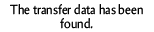
<style>
.page{position:relative;width:154px;height:32px;background:#ffffff}
.page>*{position:absolute;margin:0}
.t1{font:13.2px "Amira-Roman";color:#000000;scale:0.91 1}
</style>
<div class="page">
<p class="t1" style="left:10px;top:4px;width:133px;height:25px;text-align:center">The transfer data has been found.</p>
</div>
